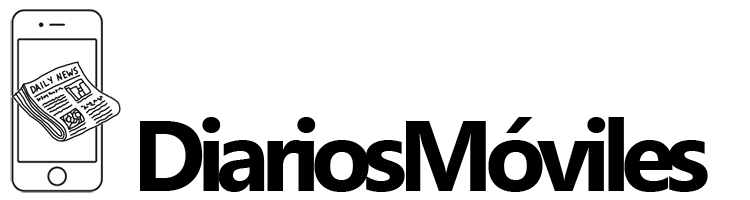
<style>
.page{position:relative;width:750px;height:200px;background:#ffffff}
.page>*{position:absolute;margin:0}
.t1{font:100px "SegoeUI-Bold";letter-spacing:-0.09em;color:#000000}
</style>
<div class="page">
<p class="t1" style="left:140px;top:117px;width:568px;height:75px">DiariosMóviles</p>
</div>
